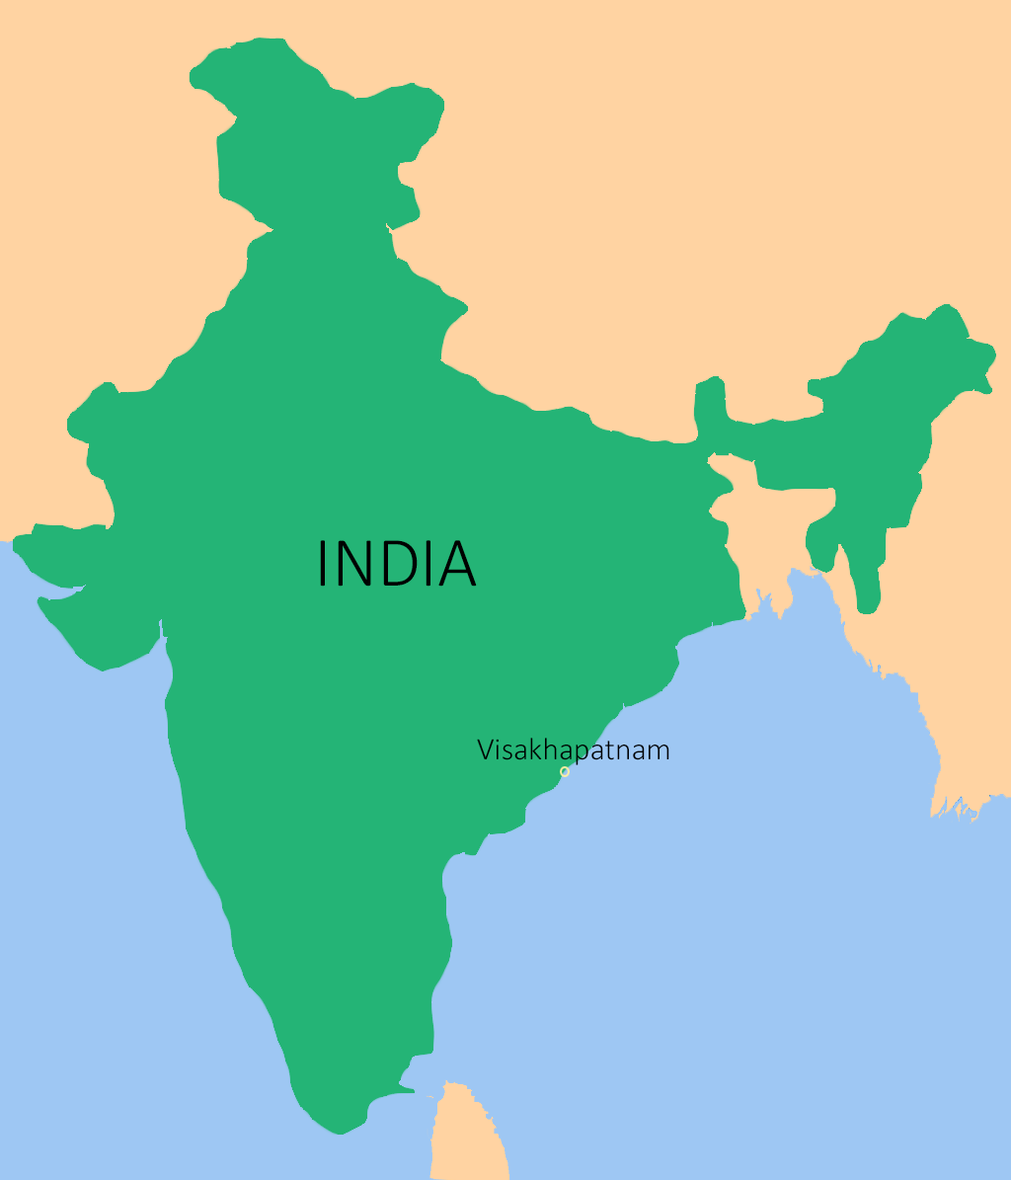
<style>
.page{position:relative;width:1011px;height:1180px;background:#ffd3a2}
.page>*{position:absolute;margin:0}
.t1{font:71.1px "Calibri-Light";color:#000000}
.t2{font:31.6px "Calibri-Light";color:#000000}
</style>
<div class="page">
<p class="t1" style="left:320px;top:540px;width:157px;height:46px">INDIA</p>
<p class="t2" style="left:477px;top:737px;width:192px;height:28px">Visakhapatnam</p>
</div>
